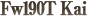
<style>
.page{position:relative;width:90px;height:18px;background:#ffffff}
.page>*{position:absolute;margin:0}
.t1{font:18px "RyuminPro-ExBold";letter-spacing:-0.08em;color:#4a3f32;font-weight:bold;scale:0.9 1}
</style>
<div class="page">
<p class="t1" style="left:0px;top:1px;width:87px;height:15px">Fw190T Kai</p>
</div>
